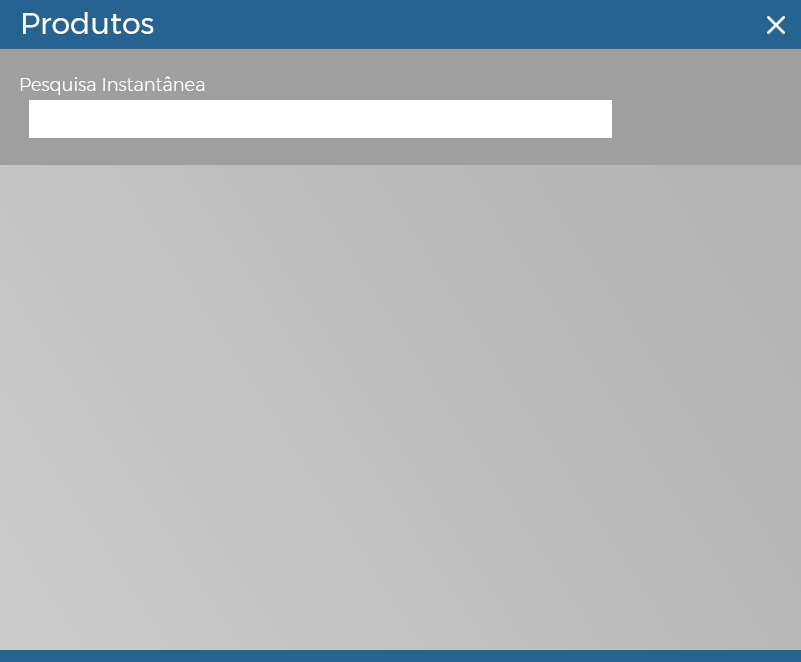
<style>
.page{position:relative;width:801px;height:662px}
.page>*{position:absolute;margin:0}
.t1{font:30px "Montserrat-Regular";color:#ffffff}
.t2{font:18px "Montserrat-Light";color:#ffffff}
</style>
<div class="page">
<p class="t1" style="left:23px;top:12px;width:131px;height:22px">Produtos</p>
<p class="t2" style="left:20px;top:76px;width:185px;height:19px">Pesquisa Instantânea</p>
</div>
